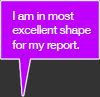
<style>
.page{position:relative;width:100px;height:97px;background:#c000ff}
.page>*{position:absolute;margin:0}
.t1{font:12px "HelveticaNeue-Medium";letter-spacing:-0.05em;color:#ffffff}
</style>
<div class="page">
<p class="t1" style="left:12px;top:11px;width:79px;height:40px">I am in most <br>excellent shape <br>for my report.</p>
</div>
